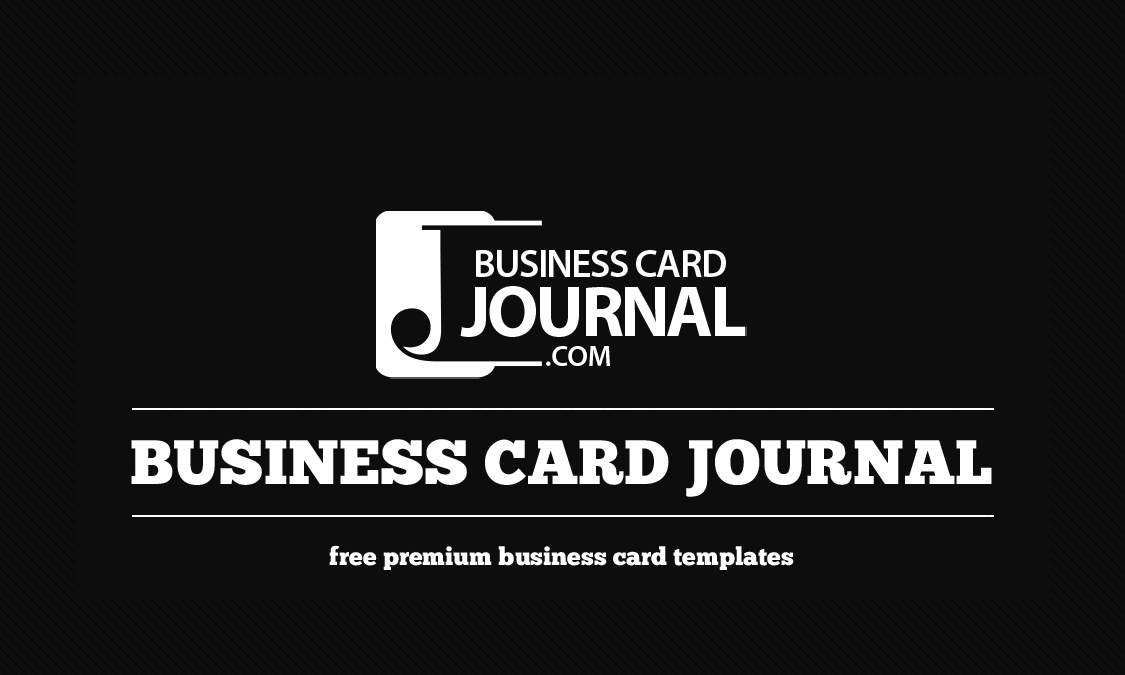
<style>
.page{position:relative;width:1125px;height:675px;background:#0d0d0d}
.page>*{position:absolute;margin:0}
.t1{font:62.5px "ChunkFive-Roman";color:#ffffff;text-transform:uppercase}
.t2{font:25px "ChunkFive-Roman";color:#ffffff}
</style>
<div class="page">
<p class="t1" style="left:131px;top:439px;width:861px;height:58px">Business Card Journal</p>
<p class="t2" style="left:329px;top:545px;width:465px;height:25px">free premium business card templates</p>
</div>
